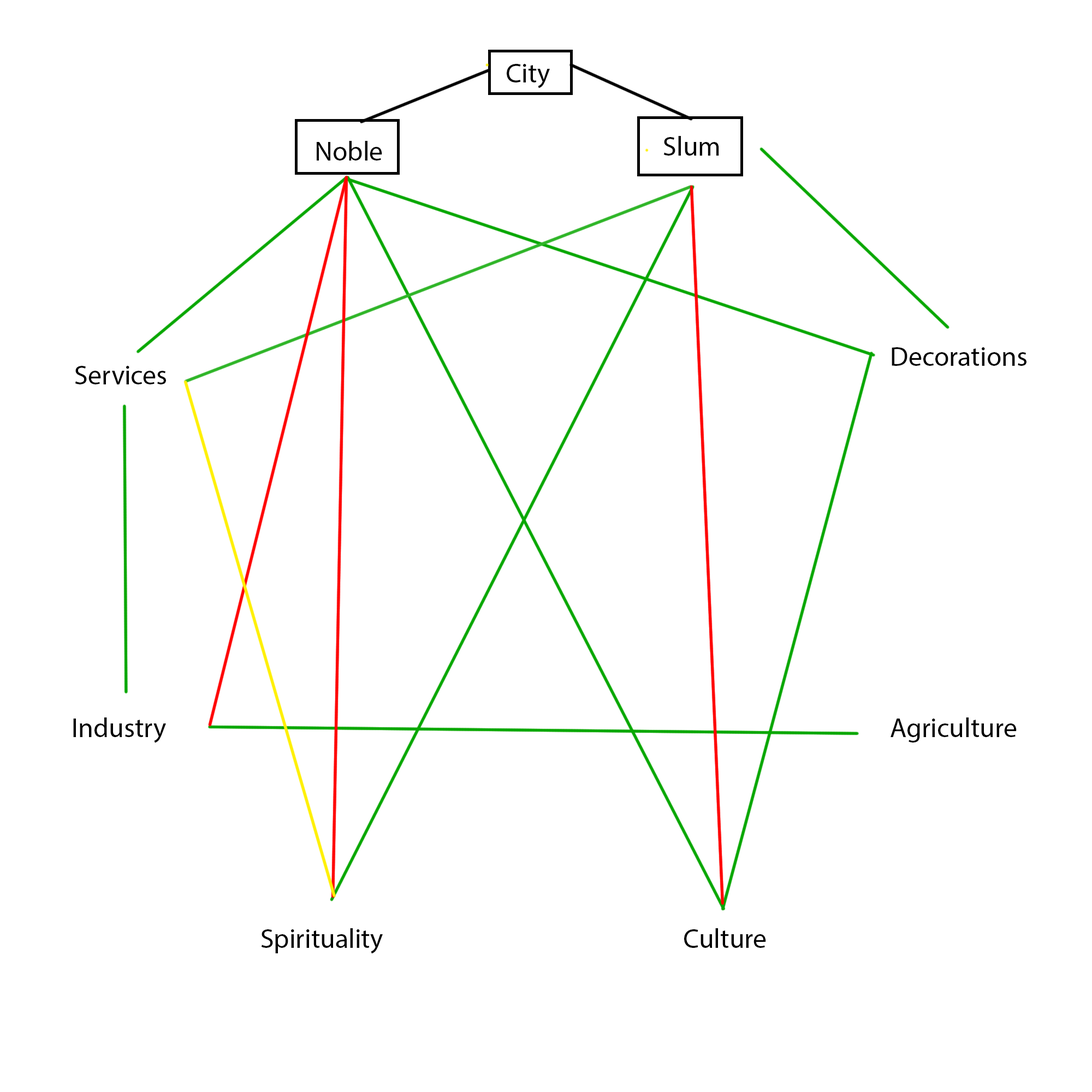
<style>
.page{position:relative;width:1092px;height:1092px;background:#ffffff}
.page>*{position:absolute;margin:0}
.t1{font:27.3px "MyriadPro-Regular";color:#000000}
</style>
<div class="page">
<p class="t1" style="left:507px;top:64px;width:43px;height:24px">City</p>
<p class="t1" style="left:663px;top:136px;width:56px;height:20px">Slum</p>
<p class="t1" style="left:317px;top:141px;width:65px;height:20px">Noble</p>
<p class="t1" style="left:892px;top:347px;width:134px;height:19px">Decorations</p>
<p class="t1" style="left:75px;top:366px;width:91px;height:18px">Services</p>
<p class="t1" style="left:73px;top:717px;width:93px;height:26px">Industry</p>
<p class="t1" style="left:891px;top:717px;width:126px;height:26px">Agriculture</p>
<p class="t1" style="left:261px;top:928px;width:122px;height:26px">Spirituality</p>
<p class="t1" style="left:684px;top:928px;width:82px;height:20px">Culture</p>
</div>
